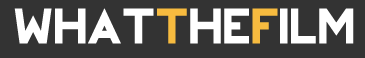
<style>
.page{position:relative;width:365px;height:58px;background:#333333}
.page>*{position:absolute;margin:0}
.t1{font:47.1px "REVOLUTION";color:#ffffff}
.t2{font:47.1px "REVOLUTION";color:#f7bb3f}
</style>
<div class="page">
<p class="t1" style="left:14px;top:8px;width:340px;height:36px">WhaT<span class="t2">T</span>he<span class="t2">F</span>ilm</p>
</div>
